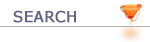
<style>
.page{position:relative;width:150px;height:42px;background:#ffffff}
.page>*{position:absolute;margin:0}
.t1{font:15px "Verdana";color:#636388;font-weight:bold}
</style>
<div class="page">
<p class="t1" style="left:13px;top:10px;width:63px;height:13px">SEARCH</p>
</div>
